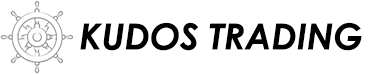
<style>
.page{position:relative;width:374px;height:74px;background:#ffffff}
.page>*{position:absolute;margin:0}
.t1{font:36px "CenturyGothic-BoldItalic";color:#000000}
</style>
<div class="page">
<p class="t1" style="left:80px;top:22px;width:282px;height:29px">KUDOS TRADING</p>
</div>
